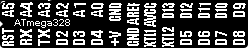
<style>
.page{position:relative;width:248px;height:48px;background:#000000}
.page>*{position:absolute;margin:0}
.t1{font:15px/17.7px "Impact";color:#ffffff;scale:0.7 1}
.t2{font:15px/17.7px "Impact";color:#ffffff}
.t3{font:15px/17.7px "Impact";letter-spacing:0.1em;color:#ffffff}
.t4{font:15px/17.7px "Impact";color:#ffffff;scale:0.8 1}
.t5{font:15px/17.7px "Impact";letter-spacing:0.05em;color:#ffffff;scale:0.9 1}
.t6{font:15px/17.7px "Impact";letter-spacing:-0.075em;color:#ffffff;scale:0.9 1}
.t7{font:15px/17.7px "Impact";color:#ffffff;scale:0.9 1}
.t8{font:15px/17.7px "Impact";letter-spacing:-0.08em;color:#ffffff;scale:0.8 1}
.t9{font:15px/17.7px "Impact";letter-spacing:-0.025em;color:#ffffff;scale:0.9 1}
.t10{font:15px/17.7px "Impact";letter-spacing:-0.08em;color:#ffffff;scale:0.9 1}
.t11{font:15px/17.7px "Impact";color:#ffffff;scale:1.4 1}
.t12{font:15px/17.7px "Impact";letter-spacing:0.05em;color:#ffffff}
.t13{font:15px/17.7px "Impact";letter-spacing:0.05em;color:#ffffff;scale:0.7 1}
.t14{font:15px/17.7px "Impact";letter-spacing:-0.075em;color:#ffffff;scale:0.7 1}
.t15{font:15px/17.7px "Impact";letter-spacing:0.025em;color:#ffffff;scale:0.7 1}
.t16{font:10px "Arial-BoldMT";color:#ffffff}
</style>
<div class="page">
<p class="t1" style="left:2px;top:2px;width:243px;height:25px;text-align:right;rotate:-90deg"><span class="t2">A5<br>A4<br>A3<br>A2<br></span><span class="t3">A</span><span class="t2">1<br>A0<br></span>G<span class="t4">N</span>D<br><span class="t5">A</span><span class="t4">R</span>EF<br><span class="t6">A</span><span class="t7">V</span>CC<br>D13<br>D12<br>D<span class="t7">11<br></span>D10<br><span class="t2">D9</span></p>
<p class="t2" style="left:2px;top:27px;width:243px;height:20px;rotate:-90deg"><span class="t8">R</span><span class="t9">S</span><span class="t10">T<br></span>R<span class="t11">X<br></span><span class="t12">T</span><span class="t11">X<br></span>D2<br>D3<br>D4<br>+V<br><span class="t1">G</span><span class="t4">N</span><span class="t1">D<br></span><span class="t13">X</span><span class="t1">T</span><span class="t14">L</span><span class="t1">1<br></span><span class="t15">X</span><span class="t1">TL2<br></span>D5<br>D6<br><span class="t12">D</span>7<br>D8</p>
<p class="t16" style="left:14px;top:19px;width:56px;height:9px">ATmega328</p>
</div>
